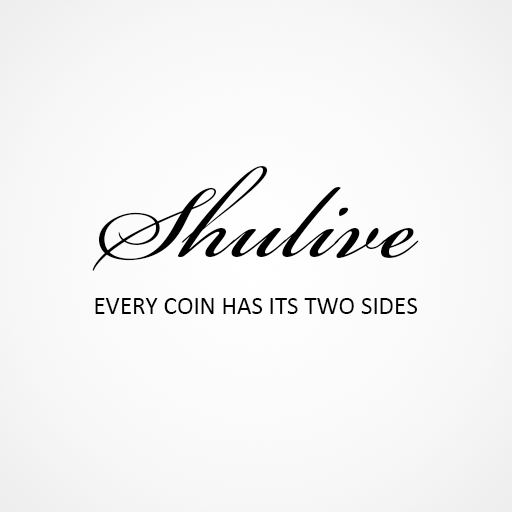
<style>
.page{position:relative;width:512px;height:512px}
.page>*{position:absolute;margin:0}
.t1{font:158.3px "BickhamScriptPro-Regular";color:#000000}
.t2{font:25px "Calibri";color:#000000}
</style>
<div class="page">
<p class="t1" style="left:92px;top:166px;width:327px;height:105px">Shulive</p>
<p class="t2" style="left:95px;top:298px;width:323px;height:16px">EVERY COIN HAS ITS TWO SIDES</p>
</div>
